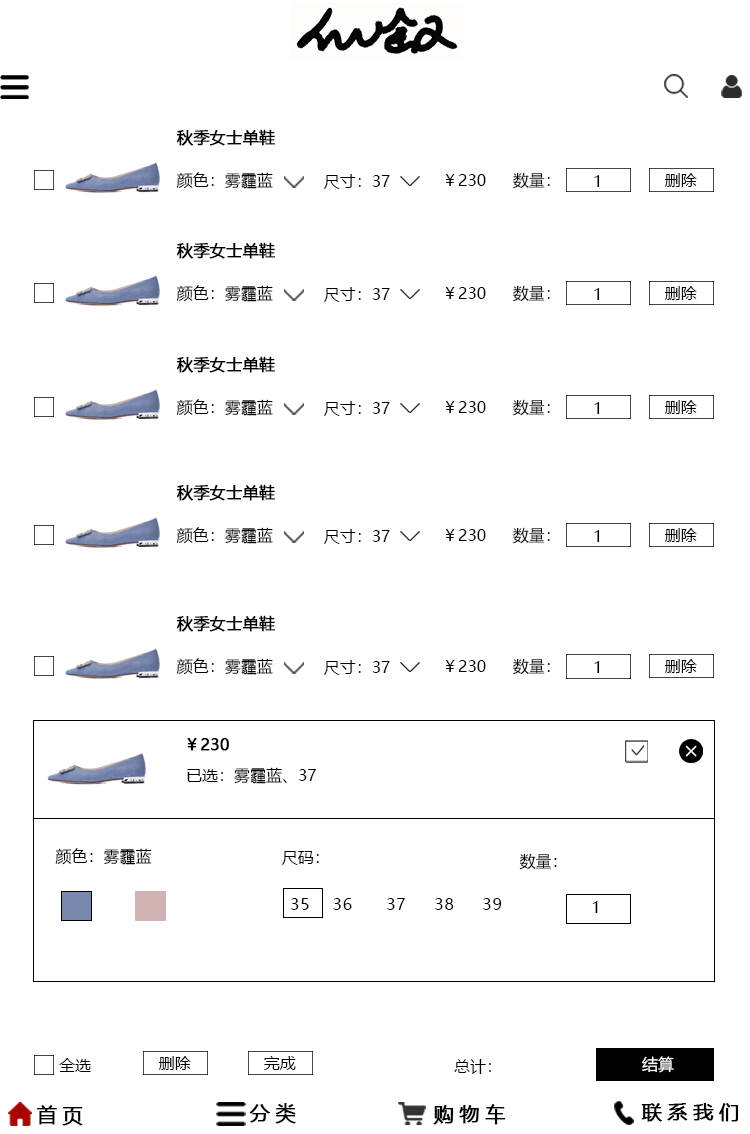
<style>
.page{position:relative;width:750px;height:1134px;background:#ffffff}
.page>*{position:absolute;margin:0}
.t1{font:16px "MicrosoftYaHei";color:#000000;font-weight:bold}
.t2{font:16px "MicrosoftYaHei";color:#000000}
.t3{font:16px "MicrosoftYaHei";letter-spacing:0.05em;color:#000000}
.t4{font:16px "MicrosoftYaHei";color:#ffffff}
.t5{font:20px "MicrosoftYaHei";letter-spacing:0.26em;color:#000000;font-weight:bold}
</style>
<div class="page">
<p class="t1" style="left:176px;top:129px;width:99px;height:17px">秋季女士单鞋</p>
<p class="t2" style="left:176px;top:172px;width:97px;height:17px">颜色：雾霾蓝</p>
<p class="t2" style="left:324px;top:174px;width:66px;height:15px">尺寸：37</p>
<p class="t2" style="left:445px;top:174px;width:41px;height:12px">￥230</p>
<p class="t2" style="left:513px;top:172px;width:37px;height:17px">数量：</p>
<p class="t2" style="left:664px;top:173px;width:33px;height:14px">删除</p>
<p class="t2" style="left:594px;top:175px;width:6px;height:12px">1</p>
<p class="t1" style="left:176px;top:242px;width:99px;height:17px">秋季女士单鞋</p>
<p class="t2" style="left:176px;top:285px;width:97px;height:17px">颜色：雾霾蓝</p>
<p class="t2" style="left:324px;top:287px;width:66px;height:15px">尺寸：37</p>
<p class="t2" style="left:445px;top:287px;width:41px;height:12px">￥230</p>
<p class="t2" style="left:513px;top:285px;width:37px;height:17px">数量：</p>
<p class="t2" style="left:594px;top:288px;width:6px;height:12px">1</p>
<p class="t2" style="left:664px;top:286px;width:33px;height:14px">删除</p>
<p class="t1" style="left:176px;top:356px;width:99px;height:17px">秋季女士单鞋</p>
<p class="t2" style="left:176px;top:399px;width:97px;height:17px">颜色：雾霾蓝</p>
<p class="t2" style="left:324px;top:401px;width:66px;height:15px">尺寸：37</p>
<p class="t2" style="left:445px;top:401px;width:41px;height:12px">￥230</p>
<p class="t2" style="left:513px;top:399px;width:37px;height:17px">数量：</p>
<p class="t2" style="left:664px;top:400px;width:33px;height:14px">删除</p>
<p class="t2" style="left:594px;top:402px;width:6px;height:12px">1</p>
<p class="t1" style="left:176px;top:484px;width:99px;height:17px">秋季女士单鞋</p>
<p class="t2" style="left:176px;top:527px;width:97px;height:17px">颜色：雾霾蓝</p>
<p class="t2" style="left:324px;top:529px;width:66px;height:15px">尺寸：37</p>
<p class="t2" style="left:445px;top:529px;width:41px;height:12px">￥230</p>
<p class="t2" style="left:513px;top:527px;width:37px;height:17px">数量：</p>
<p class="t2" style="left:594px;top:530px;width:6px;height:12px">1</p>
<p class="t2" style="left:664px;top:528px;width:33px;height:14px">删除</p>
<p class="t1" style="left:176px;top:615px;width:99px;height:17px">秋季女士单鞋</p>
<p class="t2" style="left:176px;top:658px;width:97px;height:17px">颜色：雾霾蓝</p>
<p class="t2" style="left:324px;top:660px;width:66px;height:15px">尺寸：37</p>
<p class="t2" style="left:445px;top:660px;width:41px;height:12px">￥230</p>
<p class="t2" style="left:513px;top:658px;width:37px;height:17px">数量：</p>
<p class="t2" style="left:594px;top:661px;width:6px;height:12px">1</p>
<p class="t2" style="left:664px;top:659px;width:33px;height:14px">删除</p>
<p class="t1" style="left:187px;top:738px;width:42px;height:13px">￥230</p>
<p class="t2" style="left:187px;top:767px;width:129px;height:17px">已选：雾霾蓝、37</p>
<p class="t2" style="left:55px;top:848px;width:97px;height:17px">颜色：雾霾蓝</p>
<p class="t2" style="left:282px;top:851px;width:37px;height:14px">尺码：</p>
<p class="t2" style="left:519px;top:853px;width:38px;height:17px">数量：</p>
<p class="t3" style="left:291px;top:898px;width:211px;height:12px">35    36      37     38     39</p>
<p class="t2" style="left:592px;top:901px;width:6px;height:12px">1</p>
<p class="t2" style="left:59px;top:1058px;width:32px;height:14px">全选</p>
<p class="t2" style="left:158px;top:1056px;width:33px;height:14px">删除</p>
<p class="t2" style="left:264px;top:1056px;width:32px;height:14px">完成</p>
<p class="t2" style="left:454px;top:1059px;width:37px;height:15px">总计：</p>
<p class="t4" style="left:642px;top:1056px;width:32px;height:17px">结算</p>
<p class="t5" style="left:37px;top:1105px;width:46px;height:21px">首页</p>
<p class="t5" style="left:249px;top:1103px;width:47px;height:21px">分类</p>
<p class="t5" style="left:433px;top:1104px;width:73px;height:21px">购物车</p>
<p class="t5" style="left:641px;top:1103px;width:98px;height:19px">联系我们</p>
</div>
